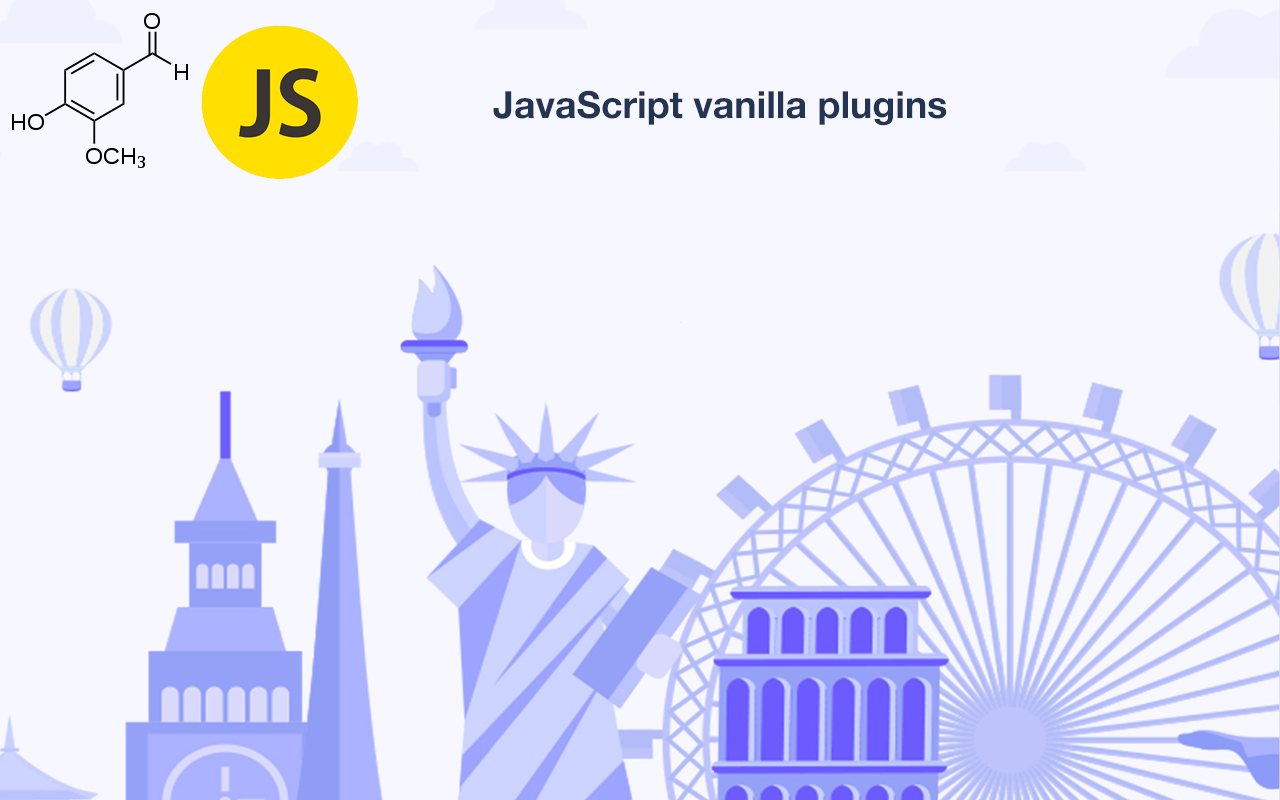
<style>
.page{position:relative;width:1280px;height:800px;background:#f7f7ff}
.page>*{position:absolute;margin:0}
.t1{font:37.5px "HelveticaNeue-Bold";color:#243553}
</style>
<div class="page">
<p class="t1" style="left:493px;top:90px;width:454px;height:36px">JavaScript vanilla plugins</p>
</div>
